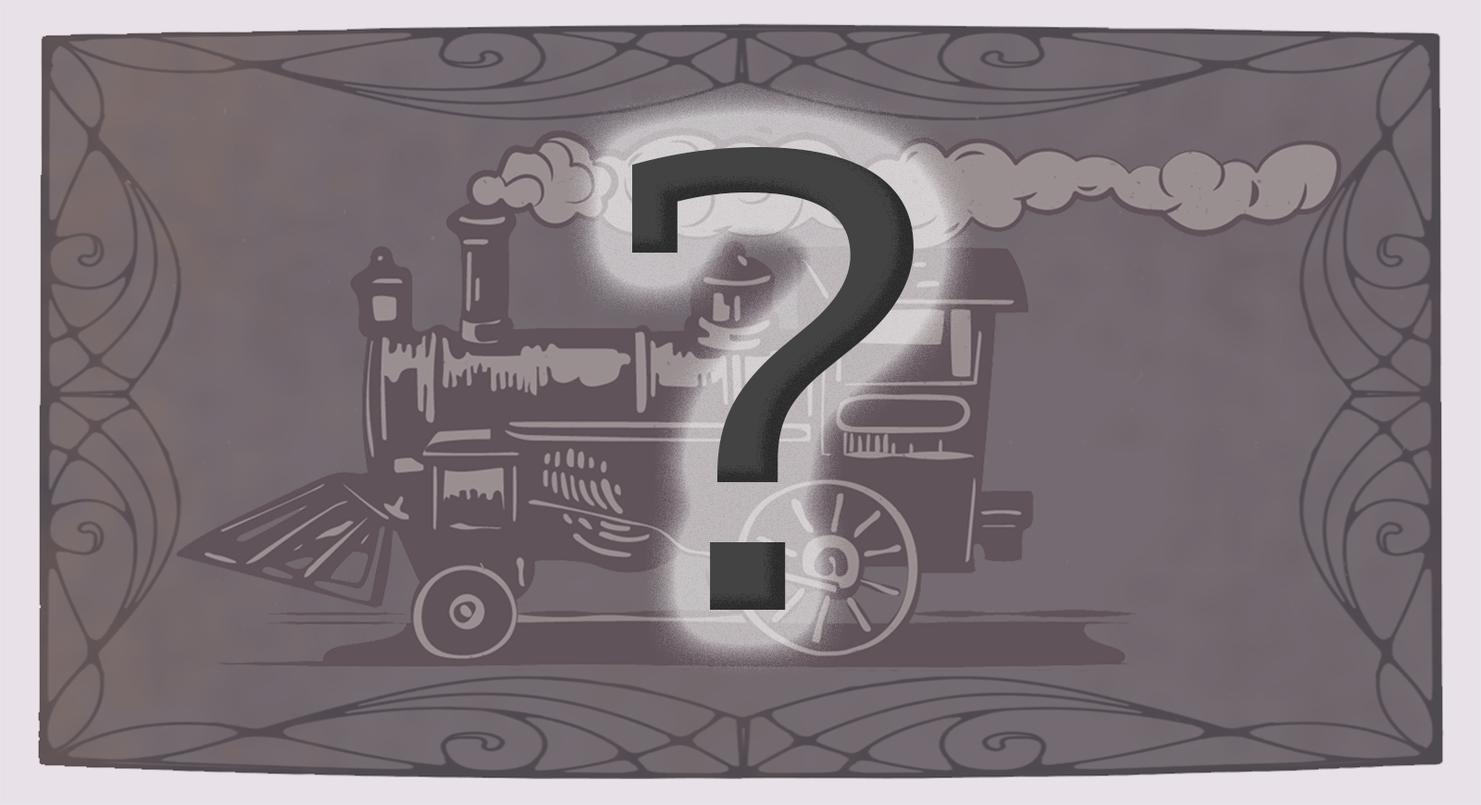
<style>
.page{position:relative;width:1481px;height:805px}
.page>*{position:absolute;margin:0}
.t1{font:625px "LucidaConsole";color:#434343}
</style>
<div class="page">
<p class="t1" style="left:632px;top:147px;width:282px;height:463px">?</p>
</div>
